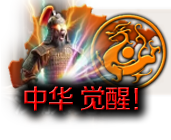
<style>
.page{position:relative;width:171px;height:140px}
.page>*{position:absolute;margin:0}
.t1{font:26.7px "FZZZHUNHJW--GB1-0";letter-spacing:-0.06em}
</style>
<div class="page">
<p class="t1" style="left:24px;top:86px;width:114px;height:25px">中华 觉醒！</p>
</div>
